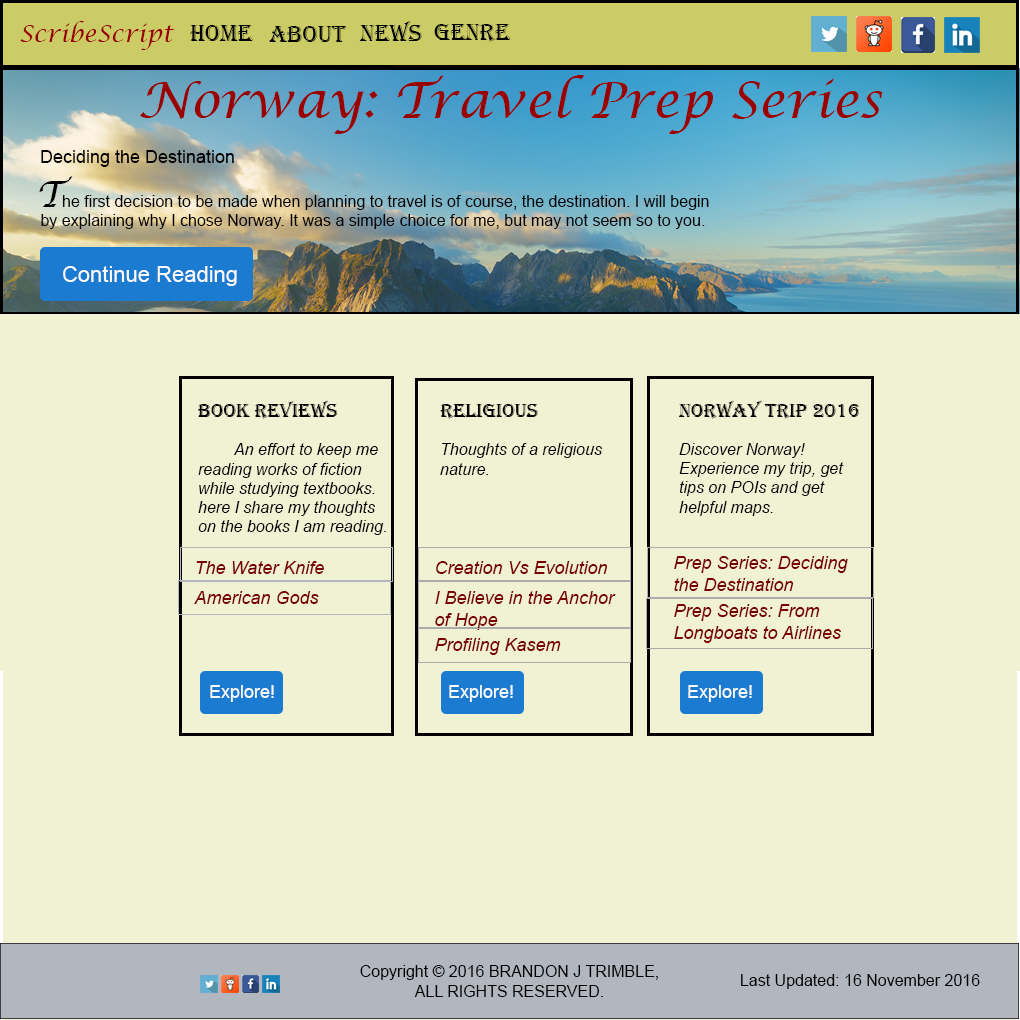
<style>
.page{position:relative;width:1020px;height:1020px;background:#f1f1d4}
.page>*{position:absolute;margin:0}
.t1{font:24px "LucidaCalligraphy-Italic";color:#990000}
.t2{font:24px "Algerian";color:#000000}
.t3{font:50px "LucidaCalligraphy-Italic";color:#990000}
.t4{font:18px "ArialMT";color:#000000}
.t5{font:16px "ArialMT";color:#000000}
.t6{font:36px "LucidaCalligraphy-Italic";color:#000000}
.t7{font:22px "ArialMT";color:#fcfbfb}
.t8{font:20px "Algerian";color:#000000}
.t9{font:16px "Arial-ItalicMT";color:#000000}
.t10{font:18px "Arial-ItalicMT";color:#790000}
.t11{font:18px "ArialMT";color:#fafbfb}
</style>
<div class="page">
<p class="t1" style="left:20px;top:21px;width:155px;height:29px">ScribeScript</p>
<p class="t2" style="left:190px;top:25px;width:63px;height:16px">Home</p>
<p class="t2" style="left:269px;top:26px;width:78px;height:16px">About</p>
<p class="t2" style="left:359px;top:21px;width:63px;height:20px">News</p>
<p class="t2" style="left:434px;top:24px;width:77px;height:18px">Genres</p>
<p class="t3" style="left:140px;top:75px;width:743px;height:59px">Norway: Travel Prep Series</p>
<p class="t4" style="left:41px;top:150px;width:193px;height:17px">Deciding the Destination</p>
<p class="t5" style="left:39px;top:176px;width:670px;height:53px"><span class="t6">T</span>he first decision to be made when planning to travel is of course, the destination. I will begin by explaining why I chose Norway. It was a simple choice for me, but may not seem so to you.</p>
<p class="t7" style="left:63px;top:266px;width:174px;height:20px">Continue Reading</p>
<p class="t8" style="left:198px;top:400px;width:140px;height:19px">Book Reviews</p>
<p class="t8" style="left:678px;top:400px;width:181px;height:19px">Norway Trip 2016</p>
<p class="t8" style="left:440px;top:404px;width:98px;height:15px">Religious</p>
<p class="t9" style="left:198px;top:443px;width:188px;height:92px">An effort to keep me reading works of fiction while studying textbooks. here I share my thoughts on the books I am reading.</p>
<p class="t9" style="left:440px;top:443px;width:162px;height:32px">Thoughts of a religious nature.</p>
<p class="t9" style="left:679px;top:443px;width:165px;height:73px">Discover Norway! Experience my trip, get tips on POIs and get helpful maps.</p>
<p class="t10" style="left:674px;top:556px;width:174px;height:35px">Prep Series: Deciding the Destination</p>
<p class="t10" style="left:196px;top:561px;width:128px;height:13px">The Water Knife</p>
<p class="t10" style="left:436px;top:561px;width:172px;height:13px">Creation Vs Evolution</p>
<p class="t10" style="left:194px;top:591px;width:125px;height:13px">American Gods</p>
<p class="t10" style="left:435px;top:591px;width:181px;height:39px">I Believe in the Anchor of Hope</p>
<p class="t10" style="left:674px;top:604px;width:167px;height:39px">Prep Series: From Longboats to Airlines</p>
<p class="t10" style="left:435px;top:638px;width:126px;height:17px">Profiling Kasem</p>
<p class="t11" style="left:210px;top:685px;width:64px;height:17px">Explore!</p>
<p class="t11" style="left:449px;top:685px;width:64px;height:17px">Explore!</p>
<p class="t11" style="left:688px;top:685px;width:64px;height:17px">Explore!</p>
<p class="t5" style="left:360px;top:965px;width:298px;height:32px;text-align:center">Copyright © 2016 BRANDON J TRIMBLE, <br>ALL RIGHTS RESERVED.</p>
<p class="t5" style="left:741px;top:974px;width:239px;height:15px">Last Updated: 16 November 2016</p>
</div>
